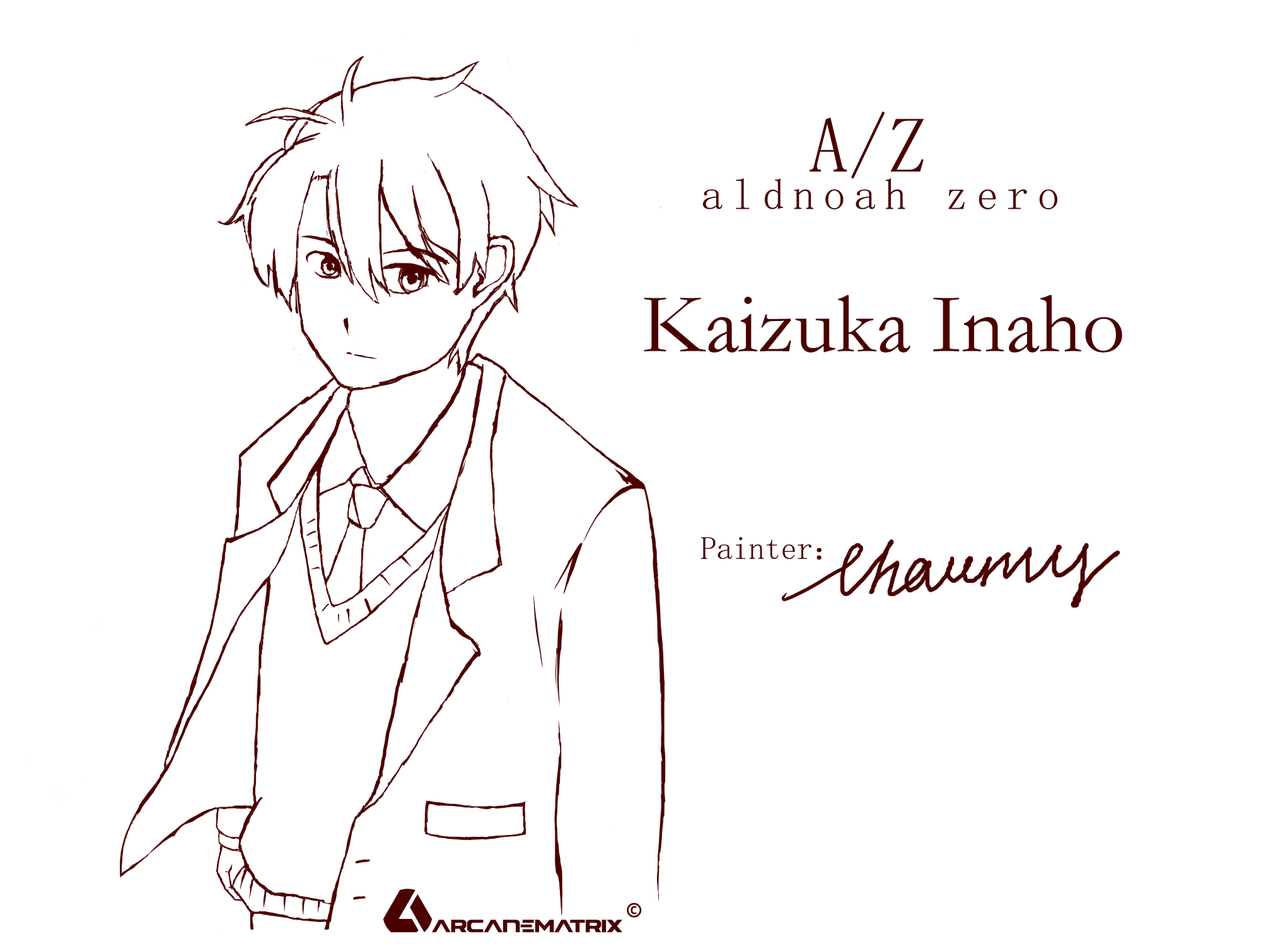
<style>
.page{position:relative;width:1261px;height:946px;background:#ffffff}
.page>*{position:absolute;margin:0}
.t1{font:78.8px "NSimSun";color:#4b0000}
.t2{font:43.7px "SimSun";letter-spacing:0.2em;color:#4b0000}
.t3{font:84.8px "STSong";color:#4b0000}
.t4{font:32.2px "SimSun";color:#4b0000}
</style>
<div class="page">
<p class="t1" style="left:810px;top:111px;width:114px;height:68px">A/Z</p>
<p class="t2" style="left:702px;top:178px;width:355px;height:31px">aldnoah zero</p>
<p class="t3" style="left:644px;top:294px;width:478px;height:58px">Kaizuka Inaho</p>
<p class="t4" style="left:701px;top:537px;width:120px;height:23px">Painter：</p>
</div>
